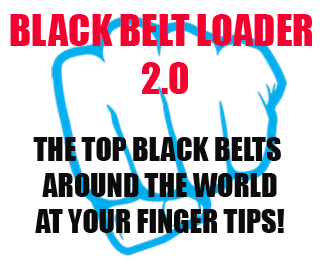
<style>
.page{position:relative;width:323px;height:270px;background:#ffffff}
.page>*{position:absolute;margin:0}
.t1{font:40.3px "Impact";color:#f4012f}
.t2{font:30px "Impact";color:#0c0b0b}
</style>
<div class="page">
<p class="t1" style="left:10px;top:14px;width:302px;height:80px;text-align:center">BLACK BELT LOADER <br>2.0</p>
<p class="t2" style="left:33px;top:137px;width:251px;height:96px;text-align:center">THE TOP BLACK BELTS <br>AROUND THE WORLD<br>AT YOUR FINGER TIPS!</p>
</div>
